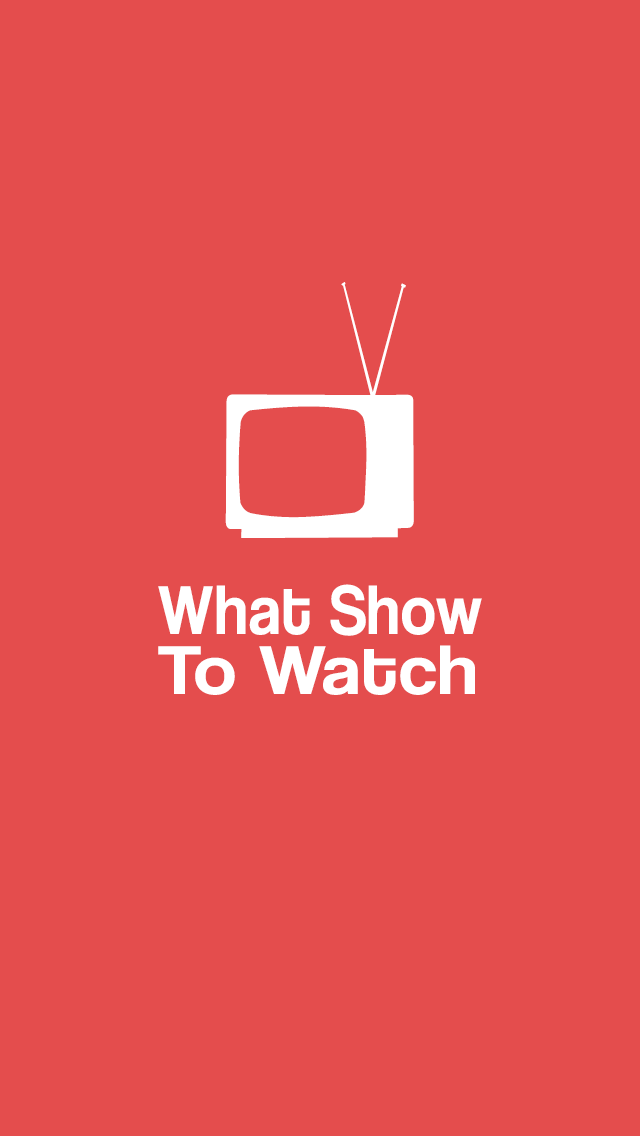
<style>
.page{position:relative;width:640px;height:1136px;background:#e44d4d}
.page>*{position:absolute;margin:0}
.t1{font:300px "bonohadavision";letter-spacing:0.025em;color:#ffffff;scale:0.9 1}
.t2{font:72px/60px "CoolveticaRg-Regular";letter-spacing:0.025em;color:#ffffff;scale:0.9 1}
.t3{font:72px/60px "CoolveticaRg-Regular";letter-spacing:0.025em;color:#ffffff;scale:1.09 1}
</style>
<div class="page">
<p class="t1" style="left:225px;top:282px;width:189px;height:256px">c</p>
<p class="t2" style="left:158px;top:584px;width:324px;height:111px">What Show <br><span class="t3">To Watch</span></p>
</div>
